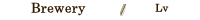
<style>
.page{position:relative;width:200px;height:20px;background:#ffffff}
.page>*{position:absolute;margin:0}
.t1{font:13.3px "CenturySchoolbook";letter-spacing:0.025em;color:#321a02}
.t2{font:10.7px "CenturySchoolbook";letter-spacing:0.025em;color:#321a02}
</style>
<div class="page">
<p class="t1" style="left:31px;top:2px;width:55px;height:14px">Brewery</p>
<p class="t2" style="left:155px;top:3px;width:14px;height:9px">Lv</p>
</div>
